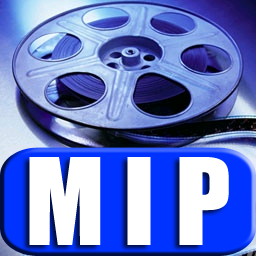
<style>
.page{position:relative;width:256px;height:256px}
.page>*{position:absolute;margin:0}
.t1{font:110.5px "Impact";color:#ffffff}
</style>
<div class="page">
<p class="t1" style="left:29px;top:157px;width:200px;height:88px">M I P</p>
</div>
